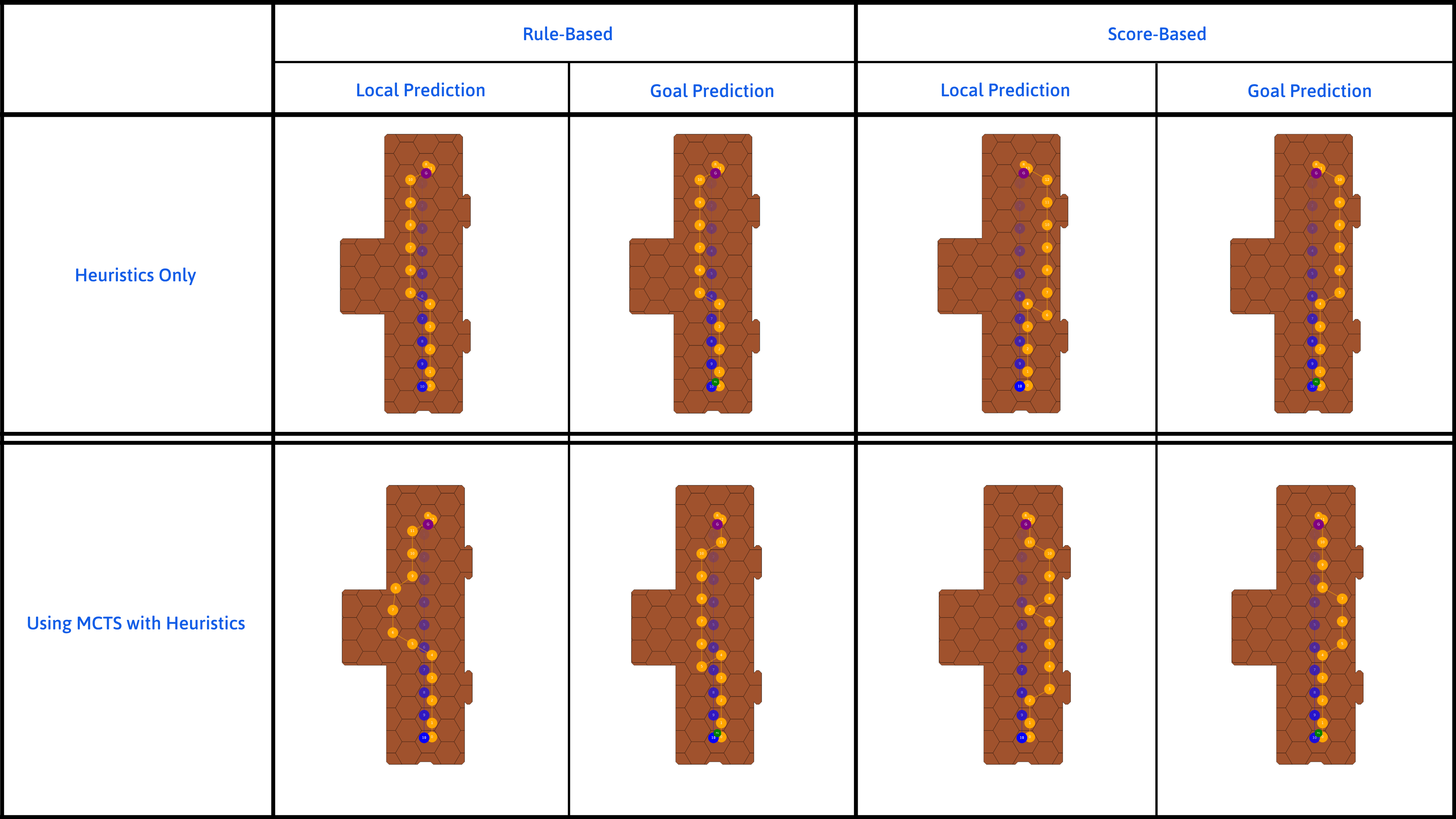
<style>
.page{position:relative;width:1456px;height:819px;background:#ffffff}
.page>*{position:absolute;margin:0}
.t1{font:18.2px "Asap-Symbol";color:#115de7}
</style>
<div class="page">
<p class="t1" style="left:524px;top:26px;width:88px;height:15px">Rule-Based</p>
<p class="t1" style="left:1108px;top:26px;width:98px;height:15px">Score-Based</p>
<p class="t1" style="left:357px;top:82px;width:128px;height:15px">Local Prediction</p>
<p class="t1" style="left:651px;top:83px;width:122px;height:14px">Goal Prediction</p>
<p class="t1" style="left:942px;top:82px;width:127px;height:15px">Local Prediction</p>
<p class="t1" style="left:1248px;top:83px;width:123px;height:14px">Goal Prediction</p>
<p class="t1" style="left:76px;top:267px;width:120px;height:18px">Heuristics Only</p>
<p class="t1" style="left:28px;top:615px;width:217px;height:19px">Using MCTS with Heuristics</p>
</div>
